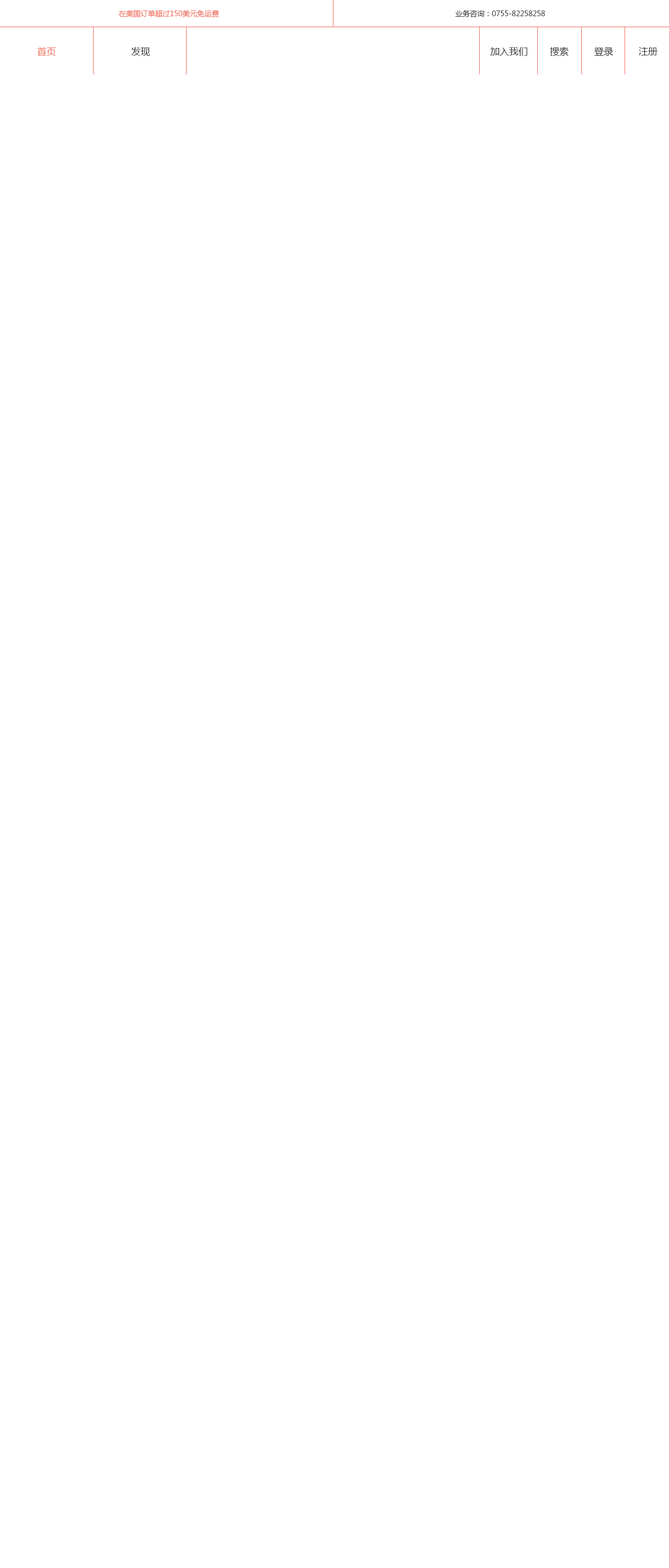
<style>
.page{position:relative;width:669px;height:1568px;background:#ffffff}
.page>*{position:absolute;margin:0}
.t1{font:7.3px "MicrosoftYaHei";color:#ee6955}
.t2{font:7.3px "MicrosoftYaHei";color:#333333}
.t3{font:9.4px "MicrosoftYaHei";color:#ee6955}
.t4{font:9.4px "MicrosoftYaHei";color:#333333}
</style>
<div class="page">
<p class="t1" style="left:119px;top:10px;width:100px;height:8px">在美国订单超过150美元免运费</p>
<p class="t2" style="left:455px;top:10px;width:90px;height:8px">业务咨询：0755-82258258</p>
<p class="t3" style="left:37px;top:47px;width:19px;height:9px">首页</p>
<p class="t4" style="left:131px;top:47px;width:19px;height:9px">发现</p>
<p class="t4" style="left:490px;top:47px;width:37px;height:9px">加入我们</p>
<p class="t4" style="left:550px;top:47px;width:19px;height:9px">搜索</p>
<p class="t4" style="left:594px;top:47px;width:19px;height:9px">登录</p>
<p class="t4" style="left:639px;top:47px;width:19px;height:8px">注册</p>
</div>
